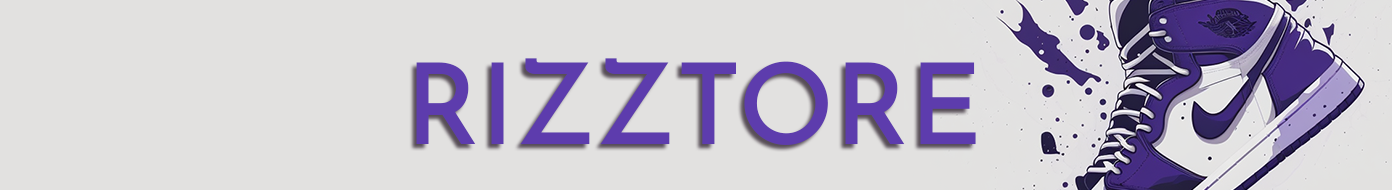
<style>
.page{position:relative;width:1392px;height:190px;background:#e2e1e0}
.page>*{position:absolute;margin:0}
.t1{font:112.5px "JosefinSansRoman-Medium";color:#5d3cad}
</style>
<div class="page">
<p class="t1" style="left:416px;top:58px;width:560px;height:87px">RIZZTORE</p>
</div>
